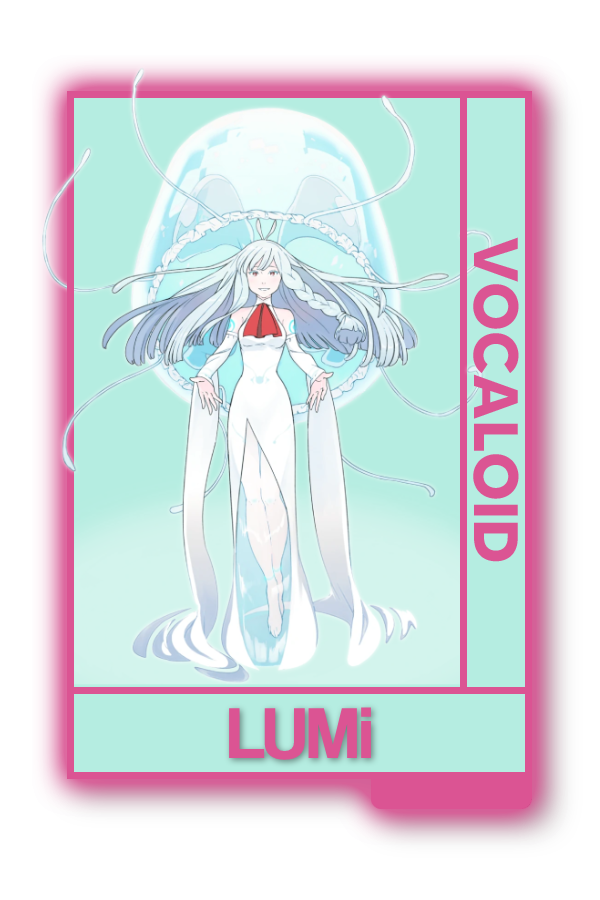
<style>
.page{position:relative;width:600px;height:900px;background:#ffffff}
.page>*{position:absolute;margin:0}
.t1{font:62.5px "MADETOMMY-Bold";color:#db5493}
.t2{font:75px "CoolveticaRg-Regular";color:#db5493}
</style>
<div class="page">
<p class="t1" style="left:473px;top:237px;width:46px;height:325px;rotate:90deg">VOCALOID</p>
<p class="t2" style="left:229px;top:707px;width:142px;height:53px">LUMi</p>
</div>
